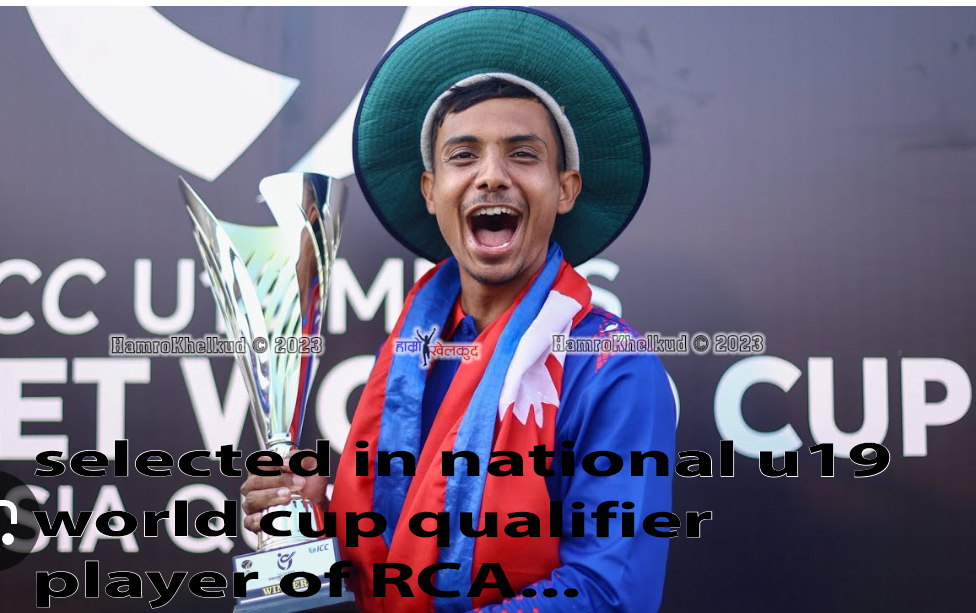
<style>
.page{position:relative;width:976px;height:613px}
.page>*{position:absolute;margin:0}
.t1{font:50.5px "MyriadPro-Bold";color:#000000;scale:1.61 1}
</style>
<div class="page">
<p class="t1" style="left:32px;top:440px;width:858px;height:169px">selected in national u19<br>world cup qualifier <br>player of RCA...</p>
</div>
